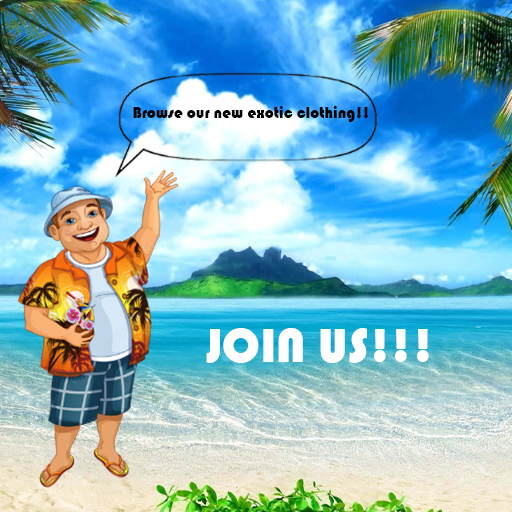
<style>
.page{position:relative;width:512px;height:512px}
.page>*{position:absolute;margin:0}
.t1{font:16px "Bauhaus93";color:#000000}
.t2{font:50px "Bauhaus93";color:#ffffff}
</style>
<div class="page">
<p class="t1" style="left:133px;top:106px;width:235px;height:16px">Browse our new exotic clothing!!</p>
<p class="t2" style="left:206px;top:328px;width:223px;height:35px">JOIN US!!!</p>
</div>
